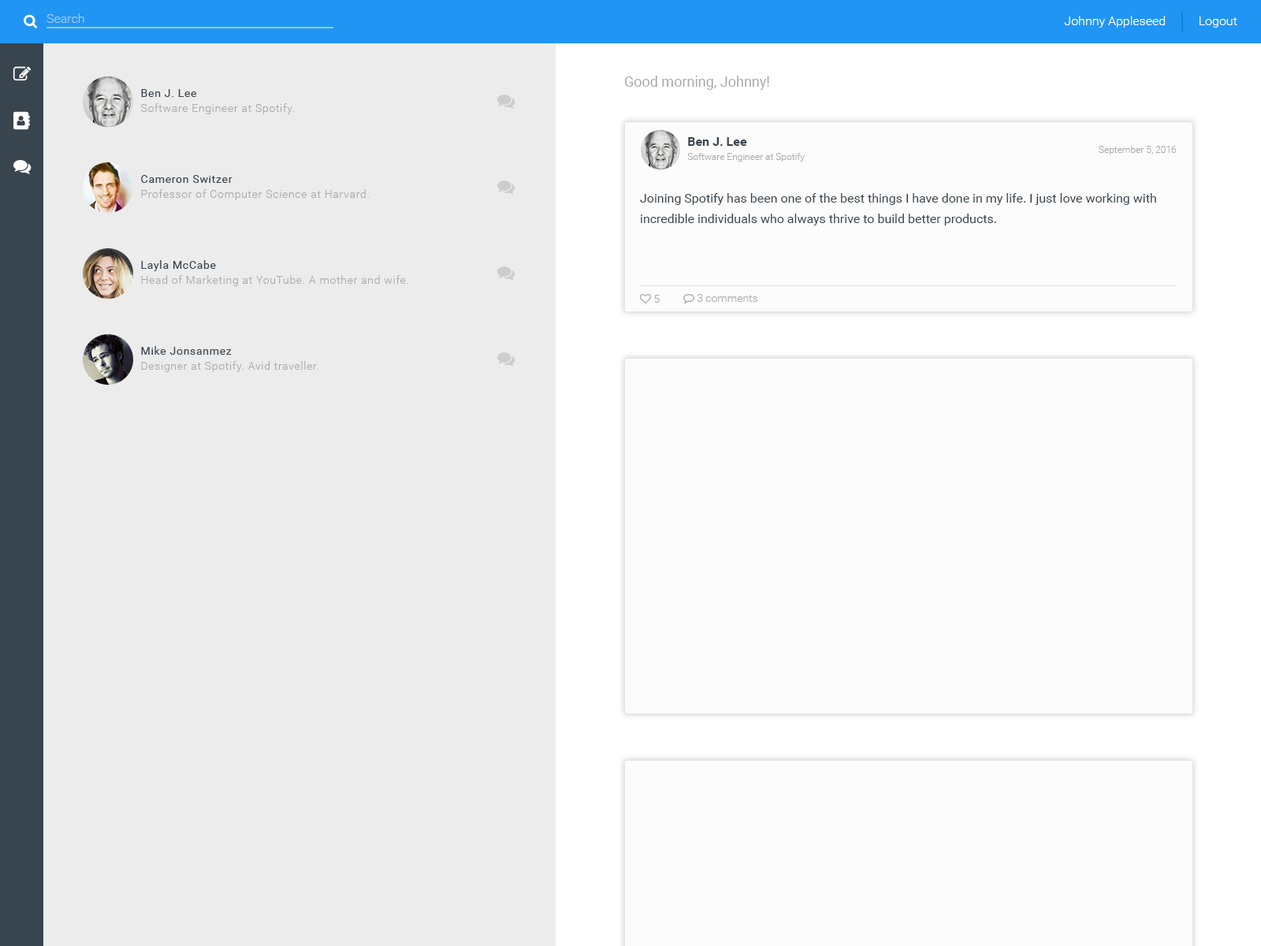
<style>
.page{position:relative;width:1261px;height:946px;background:#ececec}
.page>*{position:absolute;margin:0}
.t1{font:12.6px "Roboto-Light";color:#abc9ec}
.t2{font:12.6px "Roboto-Light";color:#ffffff}
.t3{font:14.2px "Roboto-Regular";color:#aaaaaa}
.t4{font:11px "Roboto-Regular";letter-spacing:0.05em;color:#38444e}
.t5{font:11px "Roboto-Light";letter-spacing:0.05em;color:#aaaaaa}
.t6{font:12.6px "Roboto-Bold";color:#38444e}
.t7{font:9.5px "Roboto-Light";color:#aaaaaa}
.t8{font:12.6px/20.5px "Roboto-Regular";color:#38444e}
</style>
<div class="page">
<p class="t1" style="left:46px;top:13px;width:38px;height:10px">Search</p>
<p class="t2" style="left:1064px;top:16px;width:101px;height:12px">Johnny Appleseed</p>
<p class="t2" style="left:1199px;top:17px;width:38px;height:11px">Logout</p>
<p class="t3" style="left:625px;top:76px;width:144px;height:14px">Good morning, Johnny!</p>
<p class="t4" style="left:141px;top:89px;width:55px;height:8px">Ben J. Lee</p>
<p class="t5" style="left:141px;top:103px;width:154px;height:11px">Software Engineer at Spotify.</p>
<p class="t6" style="left:688px;top:137px;width:59px;height:9px">Ben J. Lee</p>
<p class="t7" style="left:1099px;top:146px;width:78px;height:8px">September 5, 2016</p>
<p class="t7" style="left:687px;top:153px;width:118px;height:9px">Software Engineer at Spotify</p>
<p class="t4" style="left:141px;top:175px;width:91px;height:8px">Cameron Switzer</p>
<p class="t5" style="left:141px;top:189px;width:228px;height:11px">Professor of Computer Science at Harvard.</p>
<p class="t8" style="left:640px;top:193px;width:516px;height:32px">Joining Spotify has been one of the best things I have done in my life. I just love working with incredible individuals who always thrive to build better products.</p>
<p class="t4" style="left:141px;top:260px;width:75px;height:11px">Layla McCabe</p>
<p class="t5" style="left:141px;top:275px;width:267px;height:11px">Head of Marketing at YouTube. A mother and wife.</p>
<p class="t4" style="left:141px;top:346px;width:91px;height:9px">Mike Jonsanmez</p>
<p class="t5" style="left:141px;top:361px;width:177px;height:11px">Designer at Spotify. Avid traveller.</p>
</div>
